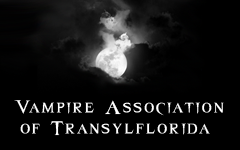
<style>
.page{position:relative;width:240px;height:150px;background:#000000}
.page>*{position:absolute;margin:0}
.t1{font:24.6px/21.6px "Van-Helsing-Regular";letter-spacing:0.075em;color:#ffffff}
</style>
<div class="page">
<p class="t1" style="left:14px;top:100px;width:210px;height:36px;text-align:center">Vampire Association<br>of Transylflorida</p>
</div>
